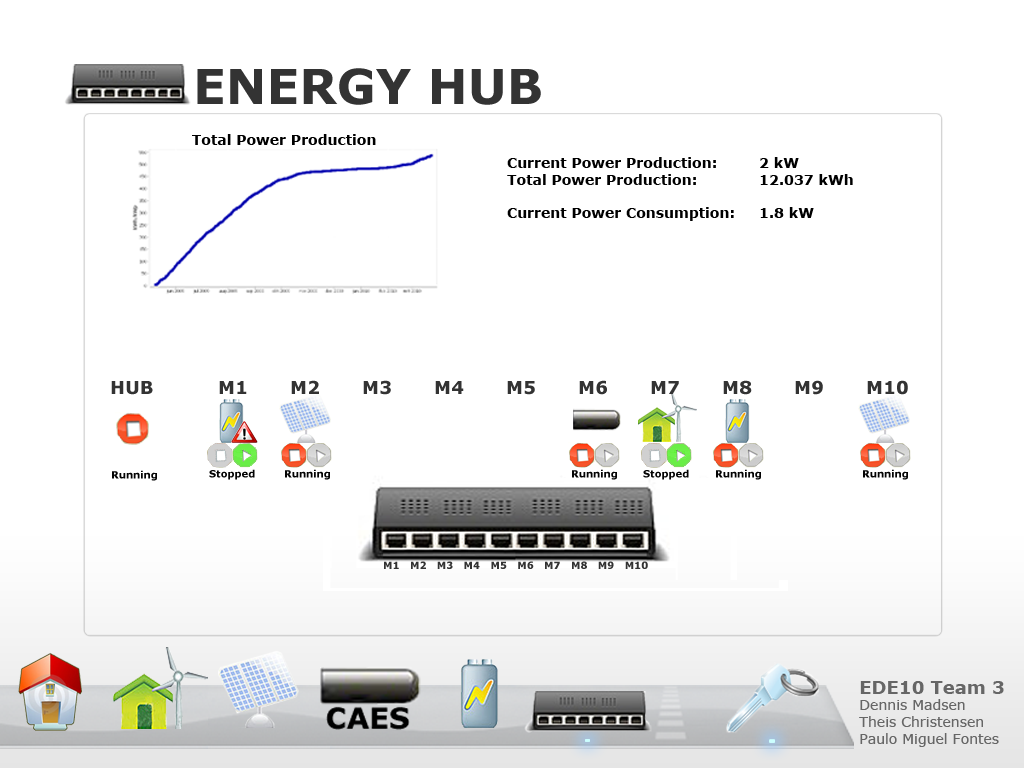
<style>
.page{position:relative;width:1024px;height:768px;background:#ffffff}
.page>*{position:absolute;margin:0}
.t1{font:48px "Verdana-Bold";color:#333333}
.t2{font:14px "Verdana-Bold";color:#000000}
.t3{font:18px "Verdana-Bold";color:#333333}
.t4{font:10px "Verdana-Bold";color:#030303}
.t5{font:10px "Verdana-Bold";color:#333333}
.t6{font:14px "Verdana";color:#666666}
.t7{font:18px "Verdana-Bold";color:#666666}
</style>
<div class="page">
<p class="t1" style="left:197px;top:68px;width:344px;height:37px">ENERGY HUB</p>
<p class="t2" style="left:192px;top:134px;width:184px;height:11px">Total Power Production</p>
<p class="t2" style="left:507px;top:157px;width:346px;height:64px">Current Power Production:   2 kW<br>Total Power Production:  12.037 kWh<br><br>Current Power Consumption: 1.8 kW</p>
<p class="t3" style="left:111px;top:380px;width:797px;height:15px">HUB  M1  M2  M3  M4  M5  M6  M7  M8  M9  M10</p>
<p class="t4" style="left:112px;top:470px;width:45px;height:11px">Running</p>
<p class="t4" style="left:209px;top:469px;width:46px;height:11px">Stopped</p>
<p class="t4" style="left:285px;top:469px;width:45px;height:11px">Running</p>
<p class="t4" style="left:572px;top:469px;width:45px;height:11px">Running</p>
<p class="t4" style="left:643px;top:469px;width:46px;height:11px">Stopped</p>
<p class="t4" style="left:716px;top:469px;width:45px;height:11px">Running</p>
<p class="t4" style="left:863px;top:469px;width:45px;height:11px">Running</p>
<p class="t5" style="left:384px;top:561px;width:264px;height:8px">M1   M2   M3   M4   M5   M6   M7   M8   M9   M10</p>
<p class="t6" style="left:859px;top:681px;width:145px;height:66px"><span class="t7">EDE10 Team 3<br></span>Dennis Madsen<br>Theis Christensen<br>Paulo Miguel Fontes</p>
</div>
